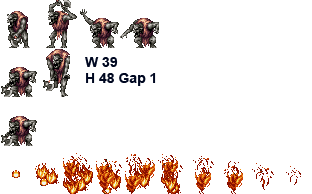
<style>
.page{position:relative;width:312px;height:194px;background:#ffffff}
.page>*{position:absolute;margin:0}
.t1{font:14px "Arial-BoldMT";color:#000821}
</style>
<div class="page">
<p class="t1" style="left:85px;top:57px;width:71px;height:29px">W 39<br>H 48 Gap 1</p>
</div>
